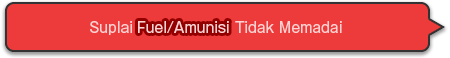
<style>
.page{position:relative;width:450px;height:58px;background:#ed3b3b}
.page>*{position:absolute;margin:0}
.t1{font:14px "GothicMB101Pro-Regular";color:#ffd3d3}
</style>
<div class="page">
<p class="t1" style="left:90px;top:21px;width:252px;height:14px">Suplai Fuel/Amunisi Tidak Memadai</p>
<p class="t1" style="left:138px;top:21px;width:91px;height:12px">Fuel/Amunisi</p>
</div>
